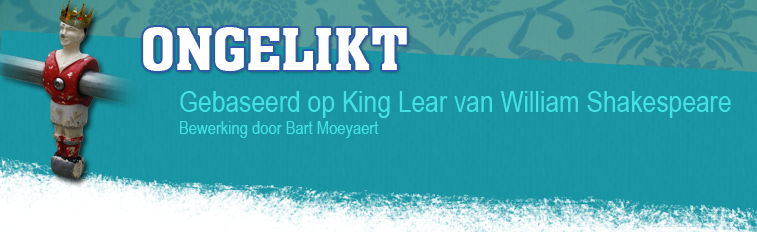
<style>
.page{position:relative;width:757px;height:232px}
.page>*{position:absolute;margin:0}
.t1{font:60px "akaChen";color:#ffffff}
.t2{font:30px "ArialNarrow";color:#44e1e3}
.t3{font:18px "ArialNarrow";color:#44e1e3}
</style>
<div class="page">
<p class="t1" style="left:143px;top:27px;width:264px;height:44px">ONGELIKT</p>
<p class="t2" style="left:180px;top:91px;width:551px;height:47px">Gebaseerd op King Lear van William Shakespeare<br><span class="t3">Bewerking door Bart Moeyaert</span></p>
</div>
